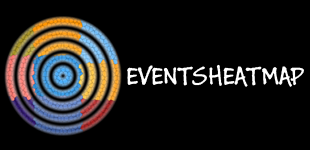
<style>
.page{position:relative;width:310px;height:150px;background:#000000}
.page>*{position:absolute;margin:0}
.t1{font:28px "BuxtonSketch";color:#ffffff}
</style>
<div class="page">
<p class="t1" style="left:127px;top:64px;width:177px;height:23px">EVENTSHEATMAP</p>
</div>
